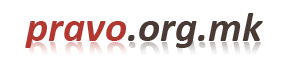
<style>
.page{position:relative;width:300px;height:72px;background:#ffffff}
.page>*{position:absolute;margin:0}
.t1{font:42px "Calibri-BoldItalic";color:#493a35}
.t2{font:42px "Calibri-BoldItalic";color:#b23730}
</style>
<div class="page">
<p class="t1" style="left:25px;top:13px;width:238px;height:35px"><span class="t2">pravo</span>.org.mk</p>
</div>
